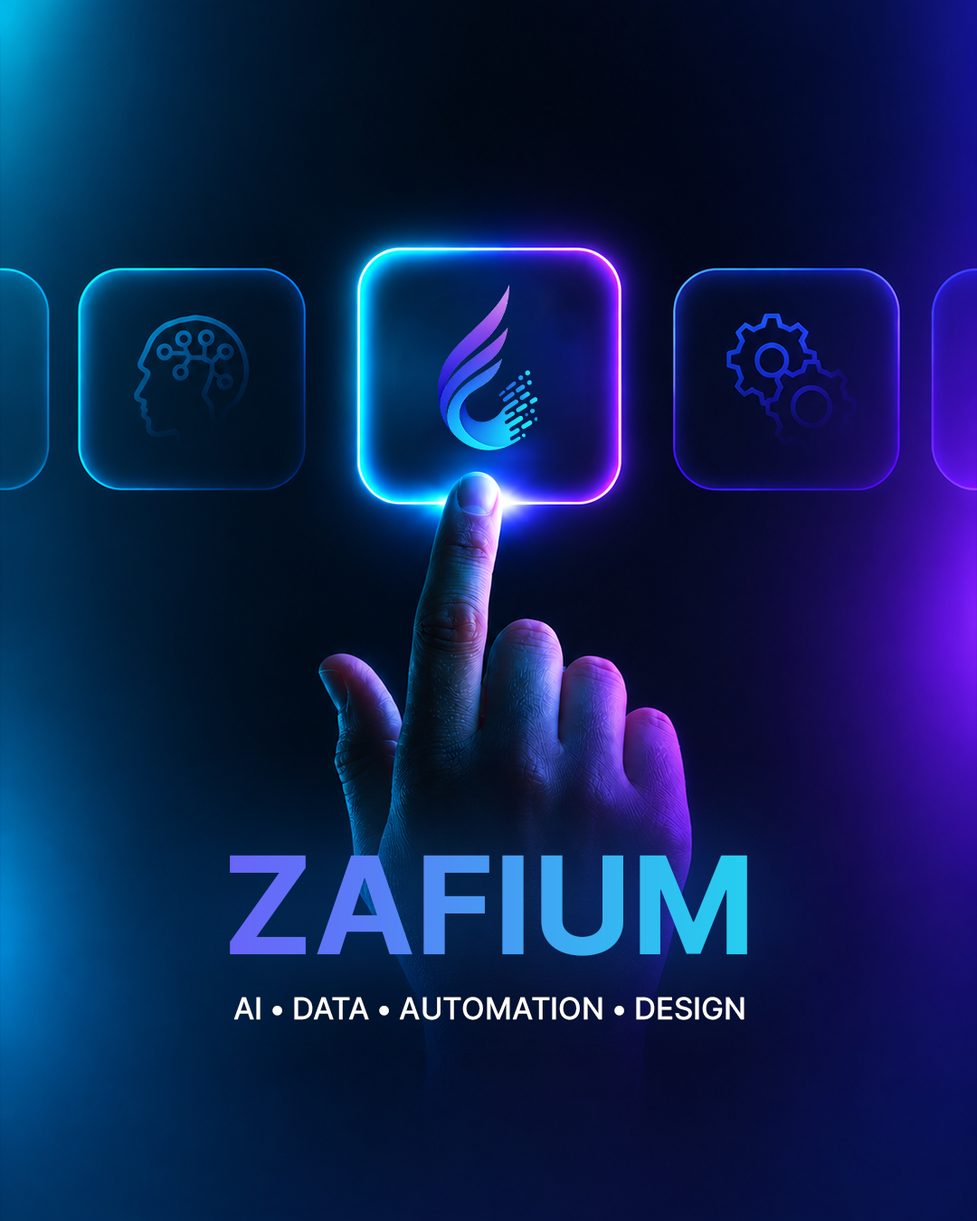
<style>
.page{position:relative;width:977px;height:1221px}
.page>*{position:absolute;margin:0}
.t1{font:135.7px "Inter-Bold"}
.t2{font:30.1px "Inter-Medium";color:#fffffe}
</style>
<div class="page">
<p class="t1" style="left:230px;top:855px;width:517px;height:101px">ZAFIUM</p>
<p class="t2" style="left:233px;top:997px;width:511px;height:23px">AI • DATA • AUTOMATION • DESIGN</p>
</div>
